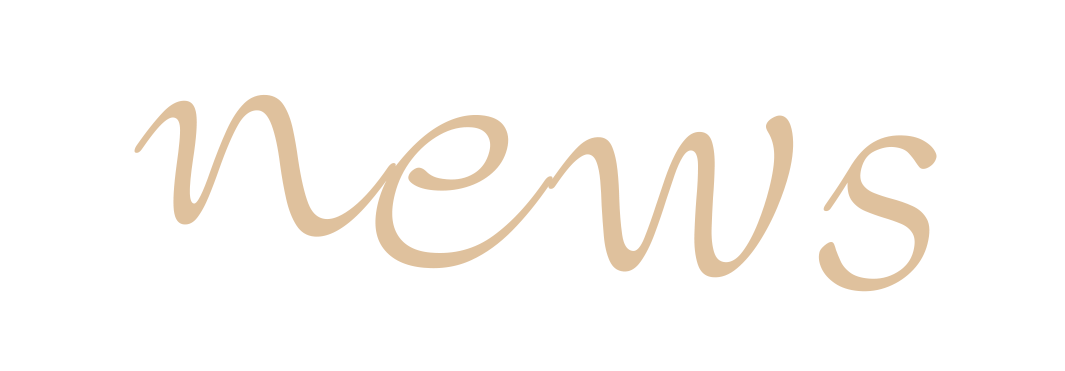
<style>
.page{position:relative;width:1065px;height:371px;background:#ffffff}
.page>*{position:absolute;margin:0}
.t1{font:400px "Ballare-Regular";letter-spacing:0.02em;color:#dfc19d;font-style:italic;scale:0.83 1}
</style>
<div class="page">
<p class="t1" style="left:134px;top:94px;width:803px;height:198px;rotate:5deg">news</p>
</div>
